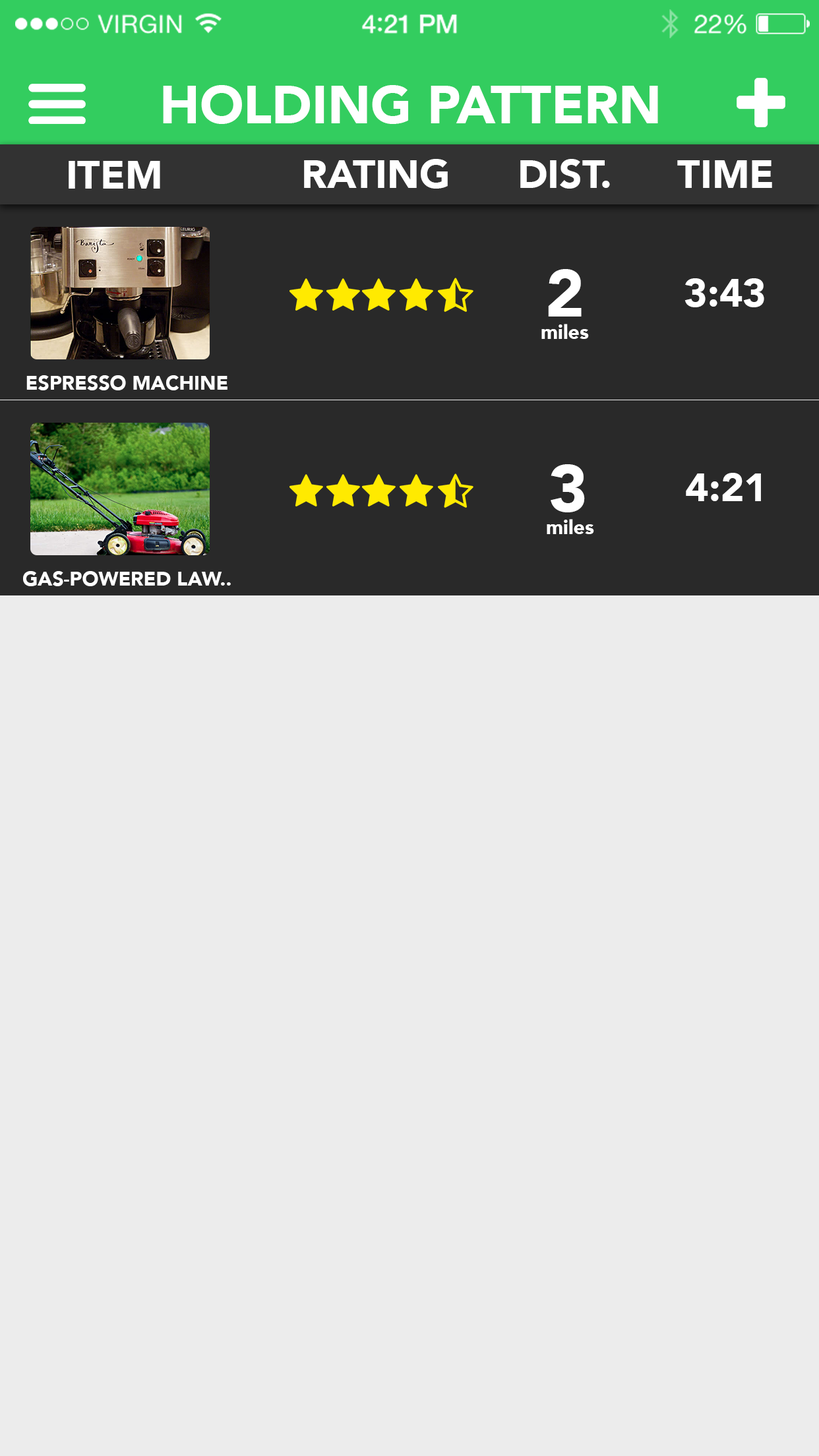
<style>
.page{position:relative;width:819px;height:1456px;background:#ececec}
.page>*{position:absolute;margin:0}
.t1{font:52.8px "Avenir-Black";color:#ffffff}
.t2{font:39.6px "Avenir-Black";color:#ffffff}
.t3{font:65.9px "Avenir-Black";color:#ffffff}
.t4{font:19.8px "Avenir-Black";color:#ffffff}
</style>
<div class="page">
<p class="t1" style="left:163px;top:85px;width:495px;height:39px">HOLDING PATTERN</p>
<p class="t2" style="left:69px;top:161px;width:91px;height:28px">ITEM</p>
<p class="t2" style="left:304px;top:159px;width:144px;height:30px">RATING</p>
<p class="t2" style="left:520px;top:159px;width:90px;height:30px">DIST.</p>
<p class="t2" style="left:677px;top:160px;width:95px;height:28px">TIME</p>
<p class="t3" style="left:548px;top:269px;width:34px;height:48px">2</p>
<p class="t2" style="left:684px;top:278px;width:80px;height:29px">3:43</p>
<p class="t4" style="left:541px;top:324px;width:48px;height:15px">miles</p>
<p class="t4" style="left:26px;top:375px;width:201px;height:15px">ESPRESSO MACHINE</p>
<p class="t2" style="left:686px;top:473px;width:75px;height:28px">4:21</p>
<p class="t4" style="left:547px;top:519px;width:47px;height:15px">miles</p>
</div>
